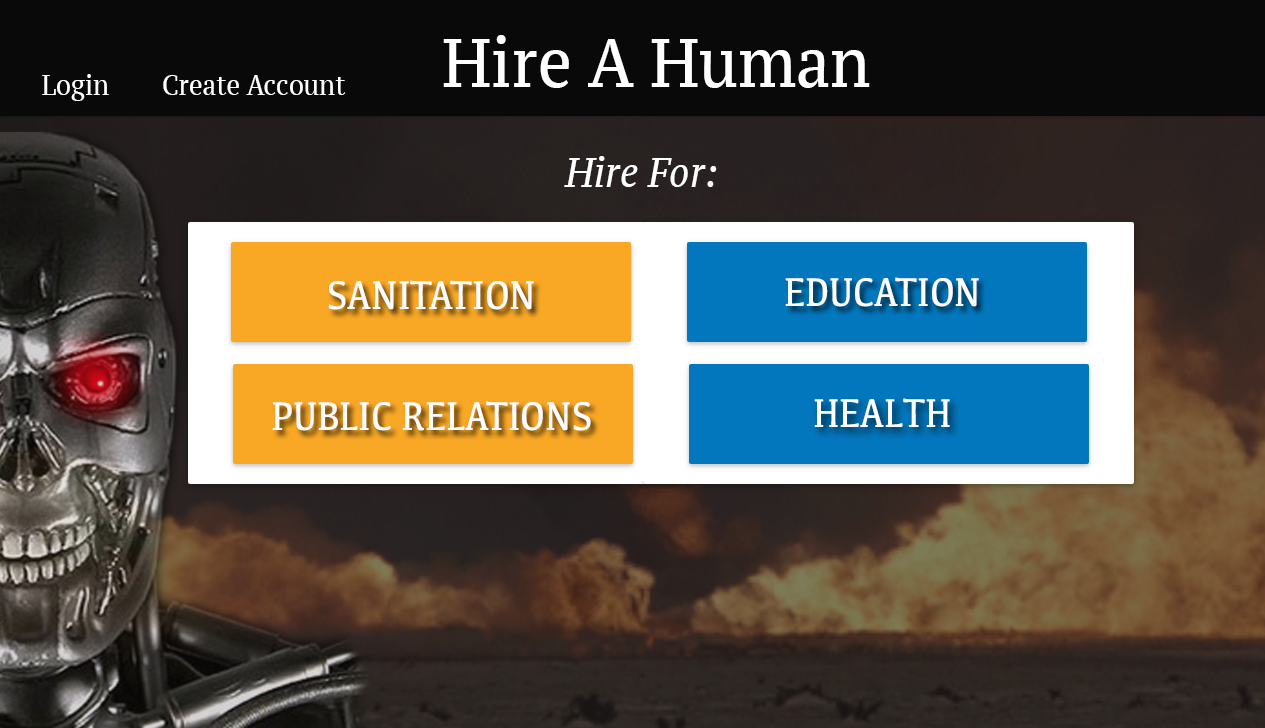
<style>
.page{position:relative;width:1265px;height:728px}
.page>*{position:absolute;margin:0}
.t1{font:69px "PTSerif-Caption";color:#ffffff;scale:0.87 1}
.t2{font:27.6px "PTSerif-Caption";color:#ffffff;scale:0.87 1}
.t3{font:41.4px "PTSerif-CaptionItalic";color:#ffffff;scale:0.87 1}
.t4{font:41.4px "Kefa-Regular";color:#fefdfd;scale:0.87 1}
</style>
<div class="page">
<p class="t1" style="left:443px;top:35px;width:427px;height:53px">Hire A Human</p>
<p class="t2" style="left:42px;top:74px;width:304px;height:27px">Login        Create Account</p>
<p class="t3" style="left:564px;top:156px;width:153px;height:31px">Hire For:</p>
<p class="t4" style="left:328px;top:280px;width:206px;height:30px">SANITATION</p>
<p class="t4" style="left:785px;top:277px;width:194px;height:30px">EDUCATION</p>
<p class="t4" style="left:272px;top:401px;width:319px;height:30px">PUBLIC RELATIONS</p>
<p class="t4" style="left:814px;top:398px;width:136px;height:29px">HEALTH</p>
</div>
